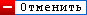
<style>
.page{position:relative;width:87px;height:15px;background:#ffffff}
.page>*{position:absolute;margin:0}
.t1{font:12.7px "CourierNewPSMT";letter-spacing:0.085em;color:#010101;scale:0.86 1}
</style>
<div class="page">
<p class="t1" style="left:21px;top:3px;width:60px;height:8px">Отменить</p>
</div>
